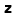
<style>
.page{position:relative;width:16px;height:16px;background:#ffffff}
.page>*{position:absolute;margin:0}
.t1{font:14px "MicrosoftYaHei-Bold";letter-spacing:0.05em;color:#000000}
</style>
<div class="page">
<p class="t1" style="left:4px;top:5px;width:8px;height:8px">z</p>
</div>
